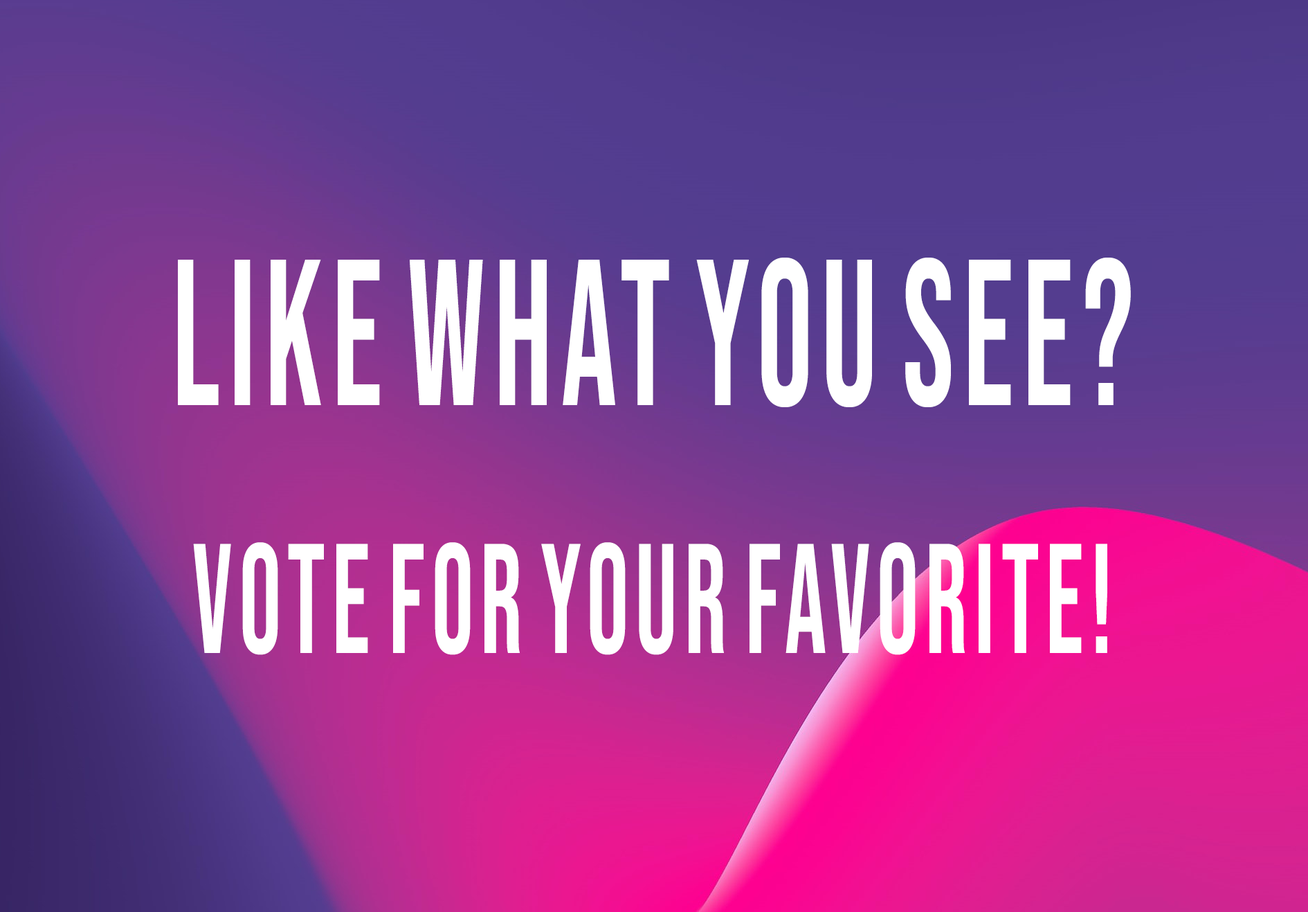
<style>
.page{position:relative;width:1308px;height:912px}
.page>*{position:absolute;margin:0}
.t1{font:155.7px/124px "BebasNeue-Regular";letter-spacing:0.068em;color:#ffffff;font-variant:small-caps;scale:0.67 1}
.t2{font:207.6px/124px "BebasNeue-Regular";letter-spacing:0.068em;color:#ffffff;text-transform:uppercase;scale:0.67 1}
</style>
<div class="page">
<p class="t1" style="left:178px;top:257px;width:953px;height:398px;text-align:center"><span class="t2">LIKE WHAT YOU SEE?<br><br></span>VOTE FOR YOUR FAVORITE!</p>
</div>
